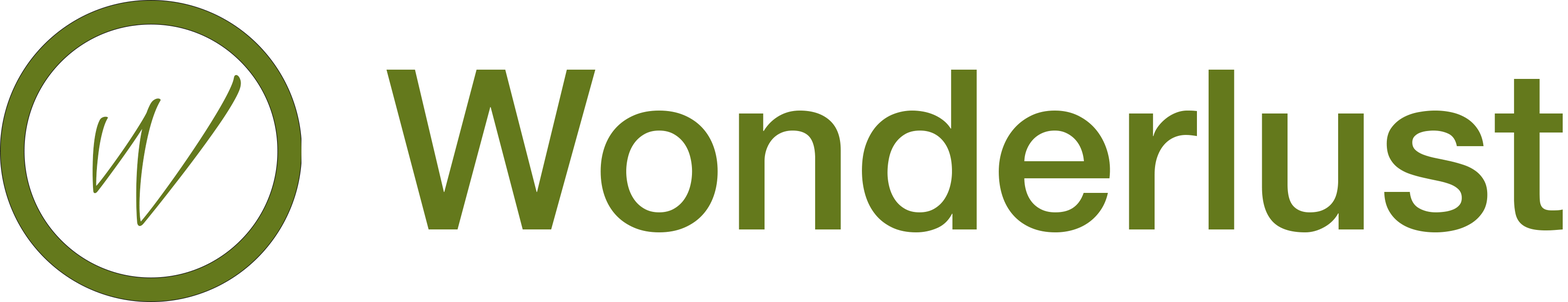
<style>
.page{position:relative;width:1568px;height:302px;background:#ffffff}
.page>*{position:absolute;margin:0}
.t1{font:224px "HelveticaNeue-Medium";color:#64791c}
</style>
<div class="page">
<p class="t1" style="left:386px;top:70px;width:1177px;height:162px">Wonderlust</p>
</div>
